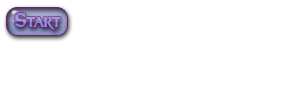
<style>
.page{position:relative;width:300px;height:100px;background:#ffffff}
.page>*{position:absolute;margin:0}
.t1{font:20px "LHFUncialCaps";color:#939be6;font-variant:small-caps}
</style>
<div class="page">
<p class="t1" style="left:15px;top:13px;width:46px;height:17px">Start</p>
</div>
